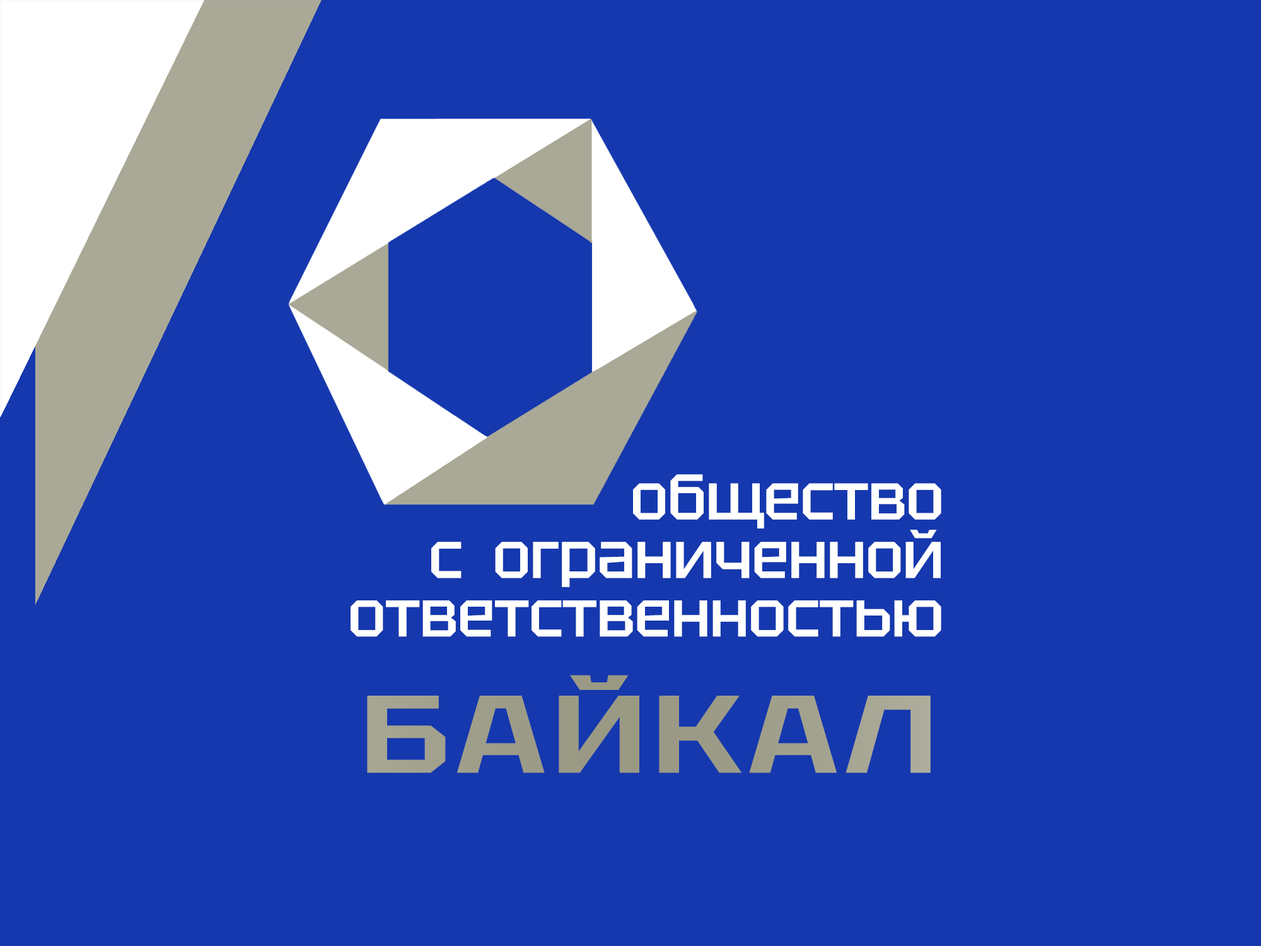
<style>
.page{position:relative;width:1261px;height:946px;background:#1538ae}
.page>*{position:absolute;margin:0}
.t1{font:64.1px/58.5px "Tektur-Medium";letter-spacing:-0.02em;color:#ffffff}
.t2{font:109.7px "Tektur-SemiBold";letter-spacing:0.04em;color:#aaa997;scale:1.27 1}
</style>
<div class="page">
<p class="t1" style="left:351px;top:474px;width:590px;height:163px">общество<br>с  ограниченной<br>ответственностью</p>
<p class="t2" style="left:367px;top:675px;width:564px;height:98px">БАЙКАЛ</p>
</div>
